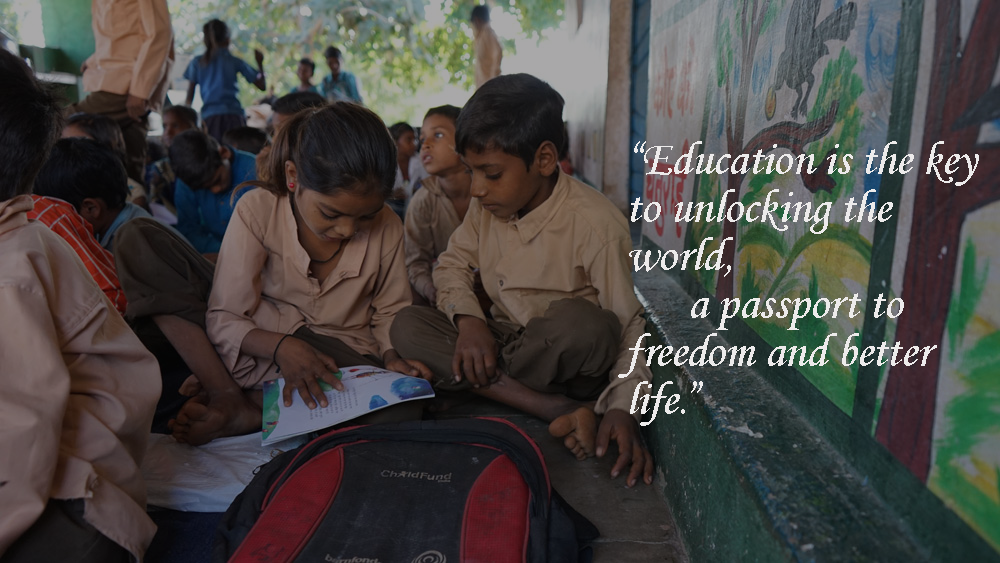
<style>
.page{position:relative;width:1000px;height:563px}
.page>*{position:absolute;margin:0}
.t1{font:48px/48px "MonotypeCorsiva";letter-spacing:-0.005em;color:#edebeb}
</style>
<div class="page">
<p class="t1" style="left:618px;top:141px;width:361px;height:285px">“Education is the key to unlocking the world,<br>      a passport to freedom and better life.”</p>
</div>
